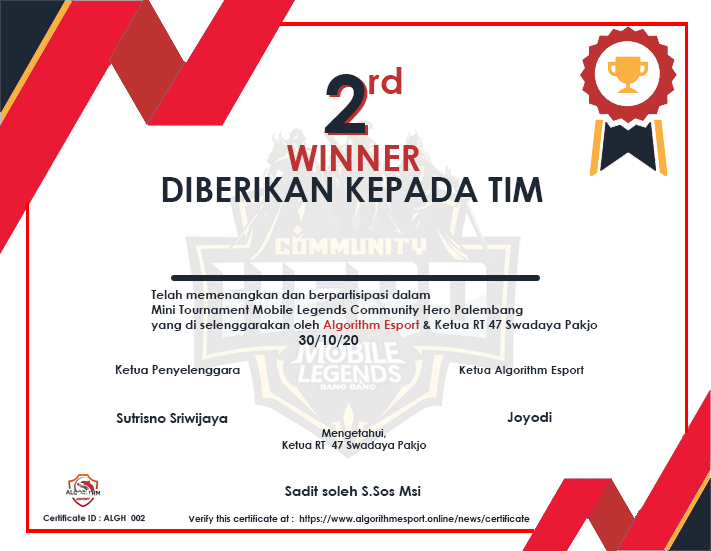
<style>
.page{position:relative;width:711px;height:551px;background:#ffffff}
.page>*{position:absolute;margin:0}
.t1{font:81.1px "CenturyGothic-Bold";color:#1e2835}
.t2{font:36px "CenturyGothic-Bold";color:#be3232}
.t3{font:34.6px "CenturyGothic-Bold";color:#1e2835}
.t4{font:12.3px "CenturyGothic-Bold";color:#1e2835}
.t5{font:12.3px "CenturyGothic-Bold";color:#be3232}
.t6{font:14px "CenturyGothic-Bold";color:#1e2835}
.t7{font:11.8px "CenturyGothic-Bold";color:#1e2835}
.t8{font:11.4px "CenturyGothic-Bold";color:#1e2835}
.t9{font:13.6px "CenturyGothic-Bold";color:#1e2835}
.t10{font:13.9px "CenturyGothic-Bold";color:#1e2835}
.t11{font:10.7px "CenturyGothic-Bold";color:#1e2835}
.t12{font:8.5px "CenturyGothic-Bold";color:#1e2835}
.t13{font:9.1px "CenturyGothic-Bold";color:#1e2835}
</style>
<div class="page">
<p class="t1" style="left:324px;top:74px;width:41px;height:59px">2</p>
<p class="t1" style="left:327px;top:76px;width:41px;height:59px">2</p>
<p class="t2" style="left:369px;top:67px;width:33px;height:27px">rd</p>
<p class="t2" style="left:287px;top:145px;width:133px;height:26px">WINNER</p>
<p class="t3" style="left:162px;top:177px;width:381px;height:25px">DIBERIKAN KEPADA TIM</p>
<p class="t4" style="left:151px;top:290px;width:447px;height:57px">Telah memenangkan dan berpartisipasi dalam <br>Mini Tournament Mobile Legends Community Hero Palembang<br>yang di selenggarakan oleh <span class="t5">Algorithm Esport </span>&amp; Ketua RT 47 Swadaya Pakjo<br>      <span class="t6">30/10/20</span></p>
<p class="t7" style="left:115px;top:365px;width:125px;height:11px">Ketua Penyelenggara</p>
<p class="t8" style="left:459px;top:366px;width:125px;height:10px">Ketua Algorithm Esport</p>
<p class="t9" style="left:116px;top:413px;width:112px;height:13px">Sutrisno Sriwijaya</p>
<p class="t10" style="left:507px;top:412px;width:45px;height:13px">Joyodi</p>
<p class="t11" style="left:282px;top:429px;width:145px;height:22px;text-align:center">Mengetahui,<br>Ketua RT  47 Swadaya Pakjo</p>
<p class="t6" style="left:285px;top:486px;width:136px;height:10px">Sadit soleh S.Sos Msi</p>
<p class="t12" style="left:43px;top:514px;width:102px;height:8px">Certificate ID : ALGH  002</p>
<p class="t13" style="left:188px;top:515px;width:342px;height:9px">Verify this certificate at :  https://www.algorithmesport.online/news/certificate</p>
</div>
